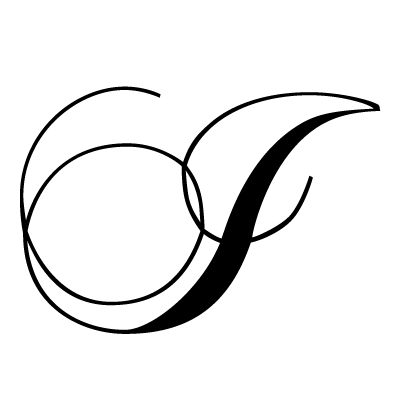
<style>
.page{position:relative;width:400px;height:400px;background:#ffffff}
.page>*{position:absolute;margin:0}
.t1{font:350px "ChopinScript";color:#000000}
</style>
<div class="page">
<p class="t1" style="left:20px;top:86px;width:361px;height:248px">I</p>
</div>
